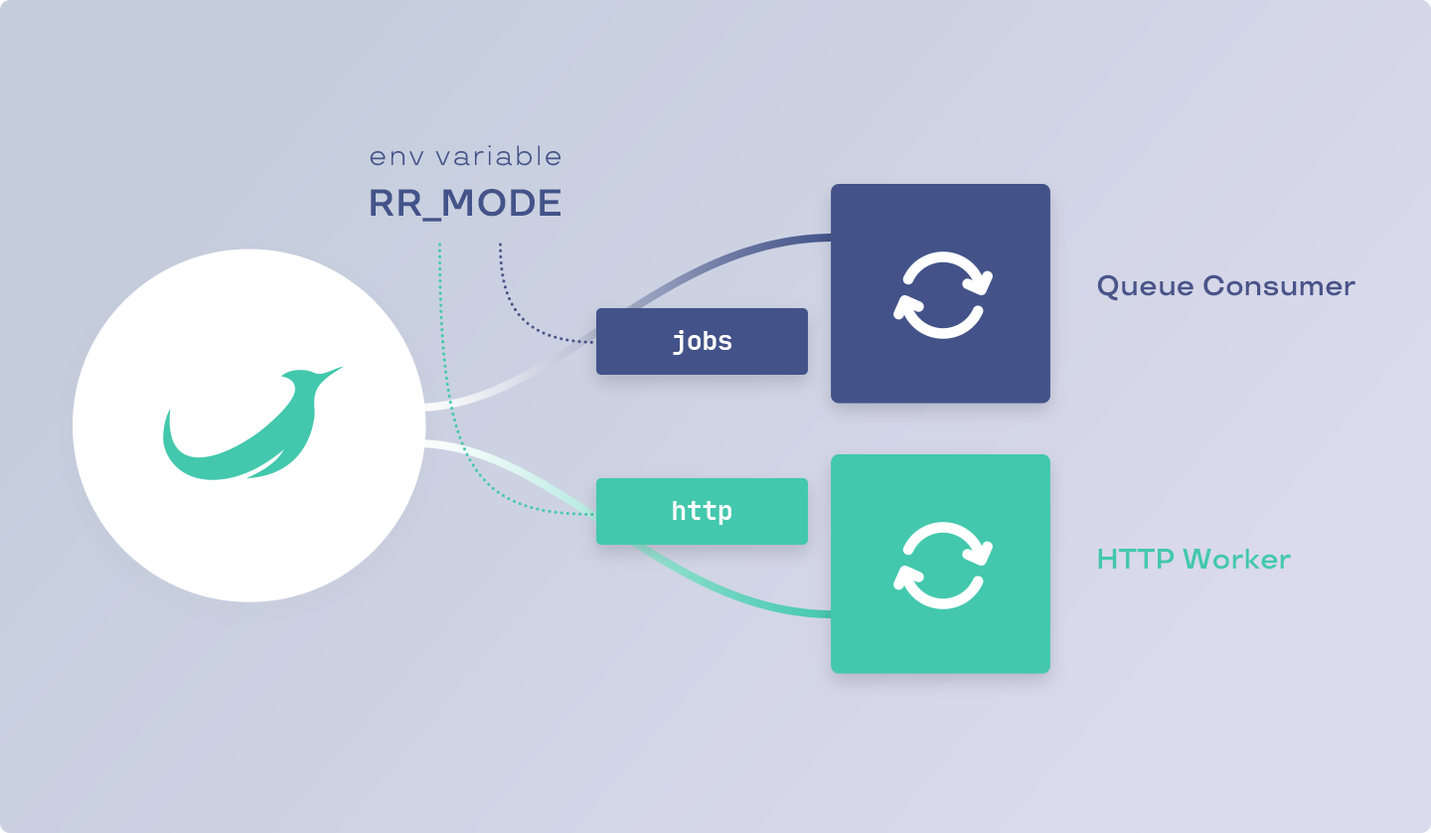
<style>
.page{position:relative;width:1431px;height:833px}
.page>*{position:absolute;margin:0}
.t1{font:27.8px/41.8px "TTTravels-Regular";letter-spacing:0.08em;color:#435389}
.t2{font:37.8px/41.8px "TTTravels-DemiBold";color:#435389}
.t3{font:28.2px "TTTravels-DemiBold";color:#495489}
.t4{font:25.8px "JetBrainsMono-Bold";color:#ffffff}
.t5{font:28.2px "TTTravels-DemiBold";color:#43c8ad}
</style>
<div class="page">
<p class="t1" style="left:370px;top:145px;width:192px;height:77px;text-align:center">env variable<br><span class="t2">RR_MODE</span></p>
<p class="t3" style="left:1097px;top:274px;width:259px;height:27px">Queue Consumer</p>
<p class="t4" style="left:673px;top:330px;width:59px;height:25px">jobs</p>
<p class="t4" style="left:673px;top:501px;width:59px;height:24px">http</p>
<p class="t5" style="left:1098px;top:549px;width:193px;height:21px">HTTP Worker</p>
</div>
